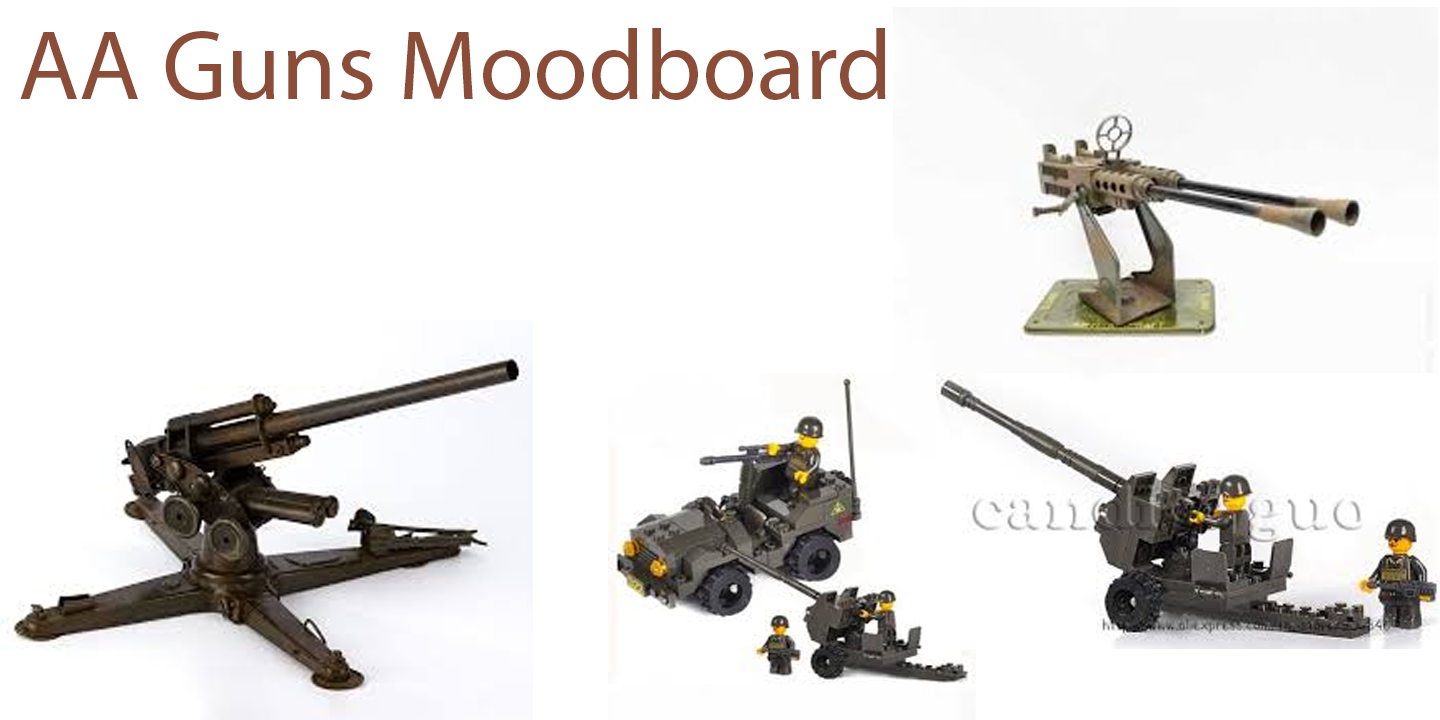
<style>
.page{position:relative;width:1440px;height:720px;background:#ffffff}
.page>*{position:absolute;margin:0}
.t1{font:100px "MyriadPro-Regular";color:#8b4d37}
</style>
<div class="page">
<p class="t1" style="left:20px;top:28px;width:866px;height:72px">AA Guns Moodboard</p>
</div>
